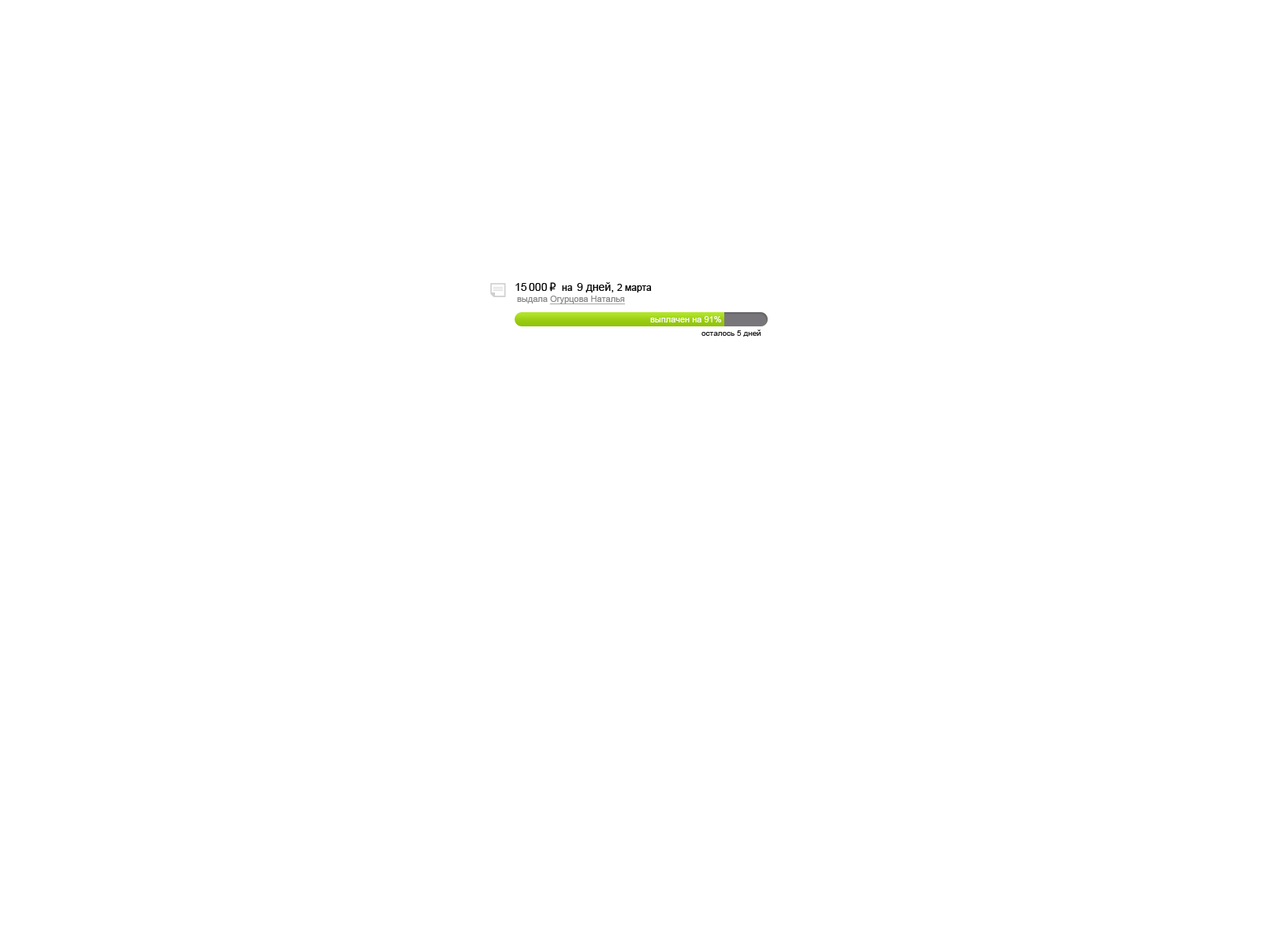
<style>
.page{position:relative;width:1261px;height:946px;background:#ffffff}
.page>*{position:absolute;margin:0}
.t1{font:11px "ArialMT";color:#000000}
.t2{font:9.5px "ArialMT";color:#000000}
.t3{font:8.7px "ArialMT";color:#888888;text-decoration:underline}
.t4{font:8.7px "ArialMT";color:#888888}
.t5{font:8.7px "ArialMT";color:#ffffff}
.t6{font:7.9px "ArialMT";color:#222222}
</style>
<div class="page">
<p class="t1" style="left:515px;top:283px;width:32px;height:8px">15 000</p>
<p class="t2" style="left:562px;top:285px;width:10px;height:6px">на</p>
<p class="t1" style="left:577px;top:282px;width:75px;height:10px">9 дней, <span class="t2">2 марта</span></p>
<p class="t3" style="left:517px;top:296px;width:108px;height:8px"><span class="t4">выдала </span>Огурцова Наталья</p>
<p class="t5" style="left:650px;top:316px;width:71px;height:6px">выплачен на 91%</p>
<p class="t6" style="left:701px;top:329px;width:60px;height:8px">осталось 5 дней</p>
</div>
